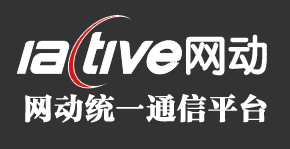
<style>
.page{position:relative;width:290px;height:149px;background:#333333}
.page>*{position:absolute;margin:0}
.t1{font:42px "FZY3JW--GB1-0";color:#ffffff;font-weight:bold}
.t2{font:30px "FZFYSJW--GB1-0";color:#ffffff;font-weight:bold}
</style>
<div class="page">
<p class="t1" style="left:186px;top:34px;width:81px;height:42px">网动</p>
<p class="t2" style="left:25px;top:94px;width:242px;height:29px">网动统一通信平台</p>
</div>
